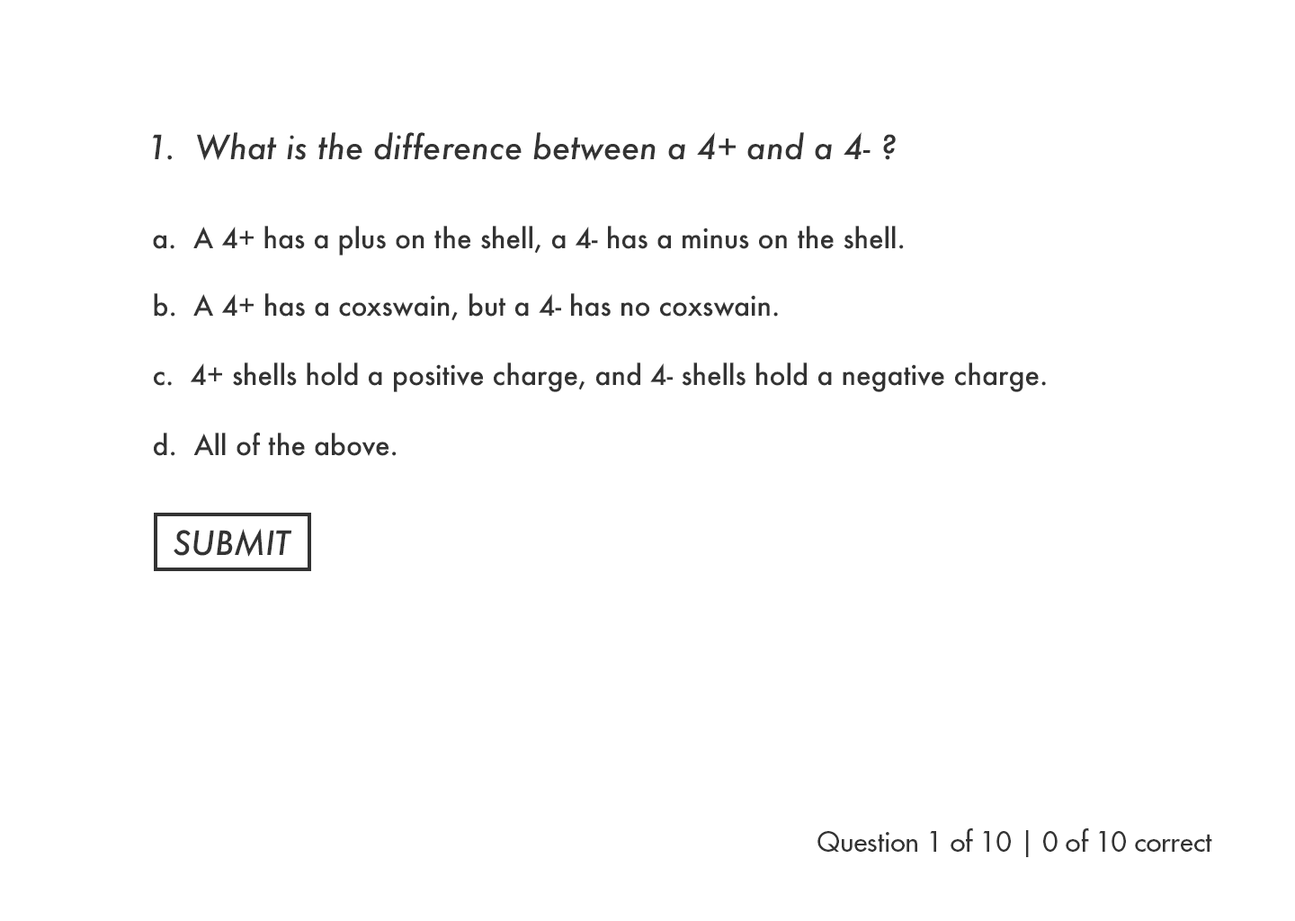
<style>
.page{position:relative;width:1295px;height:921px;background:#ffffff}
.page>*{position:absolute;margin:0}
.t1{font:32.4px "Futura-MediumItalic";color:#333333}
.t2{font:27px "Futura-Medium";color:#333333}
.t3{font:27px "FuturaStd-Medium";color:#333333}
</style>
<div class="page">
<p class="t1" style="left:152px;top:132px;width:744px;height:29px">1.  What is the difference between a 4+ and a 4- ?</p>
<p class="t2" style="left:153px;top:226px;width:751px;height:29px">a.  A 4+ has a plus on the shell, a 4- has a minus on the shell.</p>
<p class="t2" style="left:154px;top:293px;width:624px;height:28px">b.  A 4+ has a coxswain, but a 4- has no coxswain.</p>
<p class="t2" style="left:154px;top:362px;width:892px;height:30px">c.  4+ shells hold a positive charge, and 4- shells hold a negative charge.</p>
<p class="t2" style="left:154px;top:432px;width:243px;height:24px">d.  All of the above.</p>
<p class="t1" style="left:174px;top:528px;width:118px;height:29px">SUBMIT</p>
<p class="t3" style="left:817px;top:828px;width:395px;height:29px">Question 1 of 10 | 0 of 10 correct</p>
</div>
